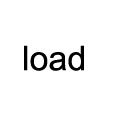
<style>
.page{position:relative;width:116px;height:116px;background:#ffffff}
.page>*{position:absolute;margin:0}
.t1{font:34px "ArialMT";color:#000000}
</style>
<div class="page">
<p class="t1" style="left:24px;top:45px;width:60px;height:26px">load</p>
</div>
